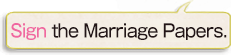
<style>
.page{position:relative;width:231px;height:55px}
.page>*{position:absolute;margin:0}
.t1{font:18px "GothicMB101Pro-Medium";letter-spacing:-0.04em;color:#221517;scale:0.9 1}
.t2{font:18px "GothicMB101Pro-Medium";letter-spacing:-0.04em;color:#f068a0;scale:0.9 1}
</style>
<div class="page">
<p class="t1" style="left:11px;top:23px;width:216px;height:17px"><span class="t2">Sign</span> the Marriage Papers.</p>
</div>
